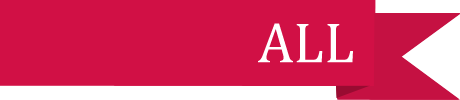
<style>
.page{position:relative;width:460px;height:100px;background:#d11045}
.page>*{position:absolute;margin:0}
.t1{font:57.2px "Cambria";color:#ffffff}
</style>
<div class="page">
<p class="t1" style="left:258px;top:23px;width:95px;height:40px">ALL</p>
</div>
